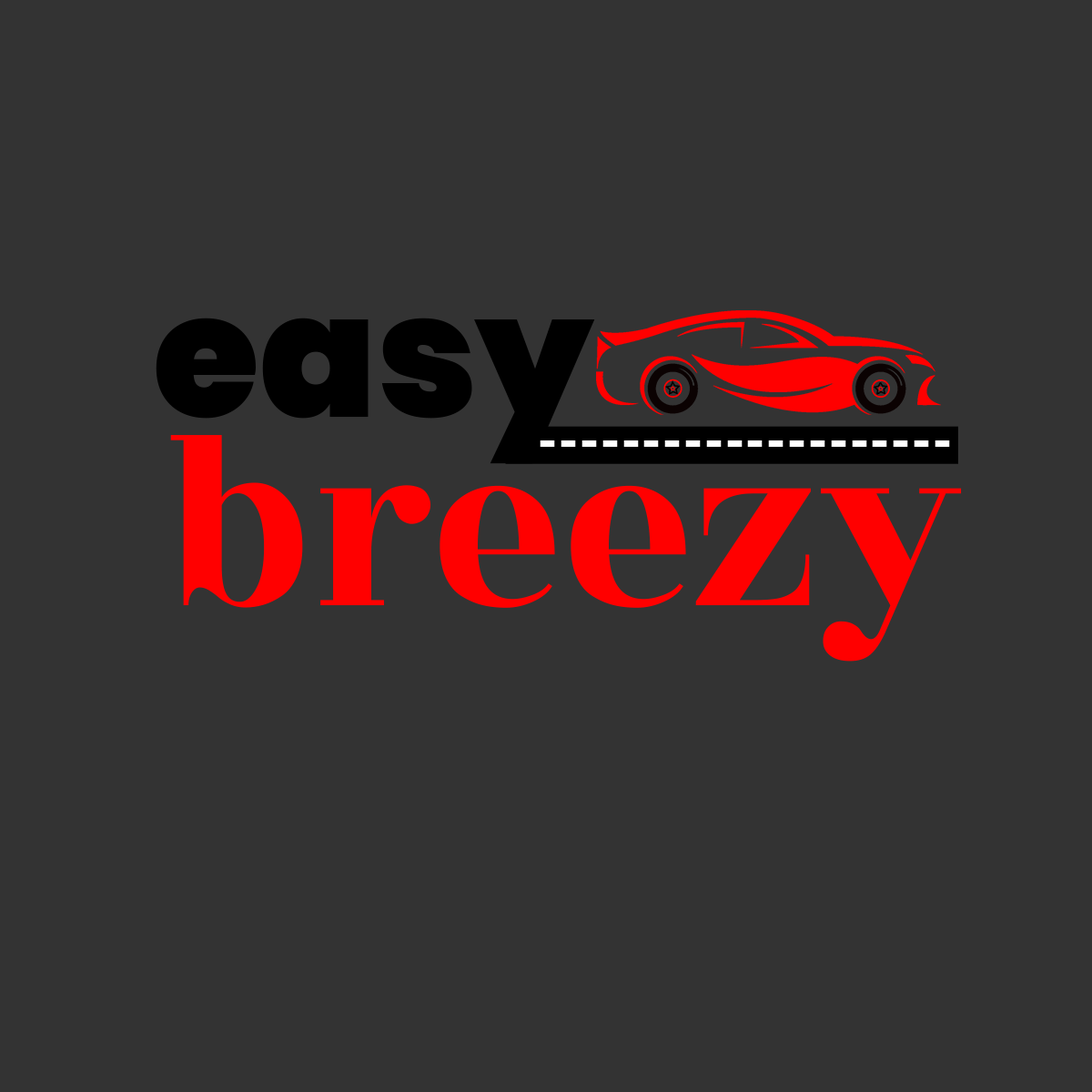
<style>
.page{position:relative;width:1092px;height:1092px;background:#333333}
.page>*{position:absolute;margin:0}
.t1{font:172.5px "Poppins-Black";color:#000000}
.t2{font:253.7px "RozhaOne-Regular";color:#ff0000}
.t3{font:83.1px "RozhaOne";color:#ffffff}
</style>
<div class="page">
<p class="t1" style="left:156px;top:318px;width:439px;height:146px">easy</p>
<p class="t2" style="left:170px;top:435px;width:792px;height:227px">breezy</p>
<p class="t3" style="left:540px;top:440px;width:410px;height:7px">--------------------</p>
</div>
